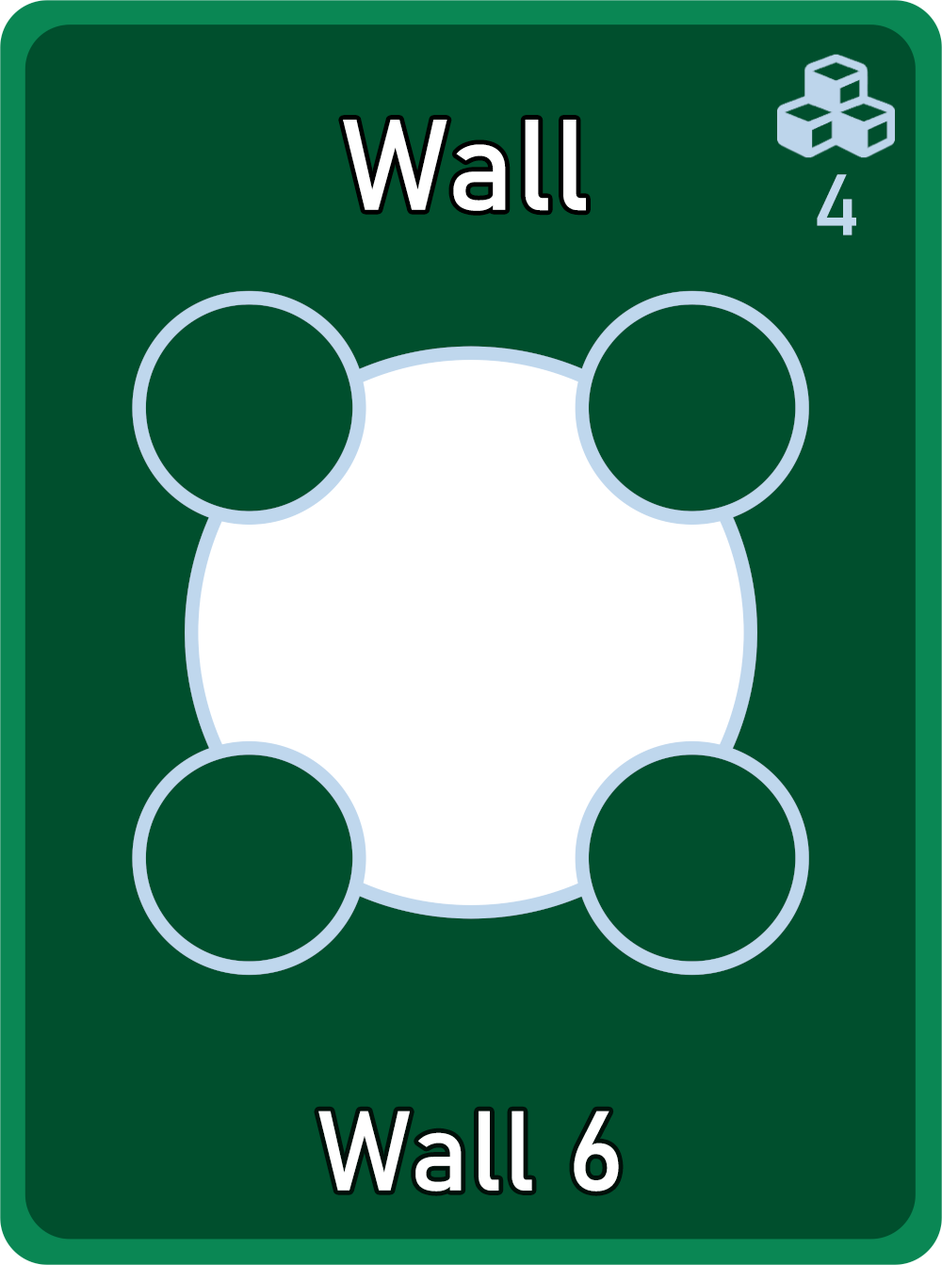
<style>
.page{position:relative;width:942px;height:1265px;background:#004f2d}
.page>*{position:absolute;margin:0}
.t1{font:126.7px "Bahnschrift";letter-spacing:0.01em;color:#ffffff}
.t2{font:85px "Bahnschrift";letter-spacing:0.01em;color:#c1d8ed}
.t3{font:111.3px "Bahnschrift";letter-spacing:0.01em;color:#ffffff}
</style>
<div class="page">
<p class="t1" style="left:343px;top:120px;width:243px;height:91px">Wall</p>
<p class="t2" style="left:817px;top:174px;width:40px;height:62px">4</p>
<p class="t3" style="left:318px;top:1111px;width:301px;height:81px">Wall 6</p>
</div>
